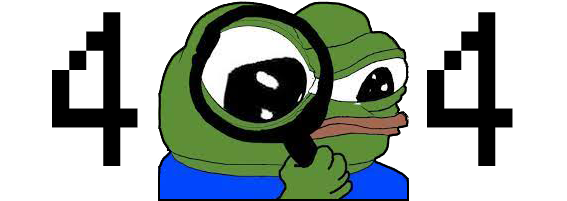
<style>
.page{position:relative;width:567px;height:201px;background:#ffffff}
.page>*{position:absolute;margin:0}
.t1{font:204.9px "Small Fonts";color:#000000;scale:1.07 1}
</style>
<div class="page">
<p class="t1" style="left:52px;top:12px;width:86px;height:154px">4</p>
<p class="t1" style="left:427px;top:12px;width:86px;height:154px">4</p>
</div>
